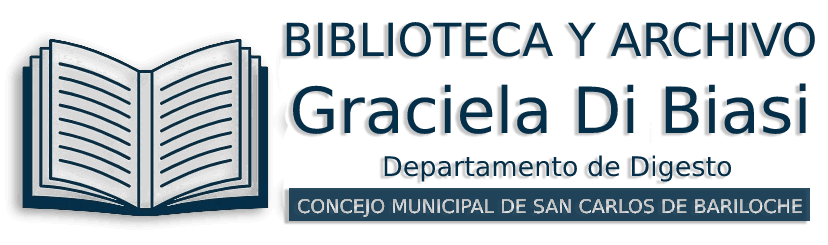
<style>
.page{position:relative;width:828px;height:245px;background:#ffffff}
.page>*{position:absolute;margin:0}
.t1{font:45.7px "DejaVuSans";color:#052e48}
.t2{font:63.6px "DejaVuSans";color:#052e48}
.t3{font:65px "DejaVuSans";color:#052e48}
.t4{font:27px "DejaVuSans";color:#052e48}
</style>
<div class="page">
<p class="t1" style="left:286px;top:22px;width:529px;height:35px">BIBLIOTECA Y ARCHIVO</p>
<p class="t2" style="left:292px;top:83px;width:514px;height:51px">Graciela Di Bia<span class="t3">si</span></p>
<p class="t4" style="left:384px;top:155px;width:348px;height:27px">Departamento de Digesto</p>
</div>
